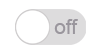
<style>
.page{position:relative;width:101px;height:56px;background:#ffffff}
.page>*{position:absolute;margin:0}
.t1{font:21px "ArialMT";color:#9a969d}
</style>
<div class="page">
<p class="t1" style="left:54px;top:19px;width:24px;height:15px">off</p>
</div>
